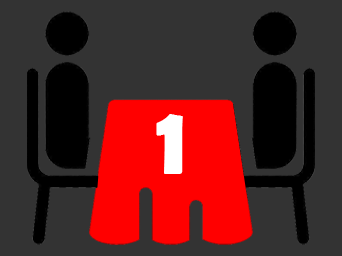
<style>
.page{position:relative;width:342px;height:256px;background:#333333}
.page>*{position:absolute;margin:0}
.t1{font:99px "BerlinSansFBDemi-Bold";color:#ffffff}
</style>
<div class="page">
<p class="t1" style="left:156px;top:114px;width:27px;height:60px">1</p>
</div>
